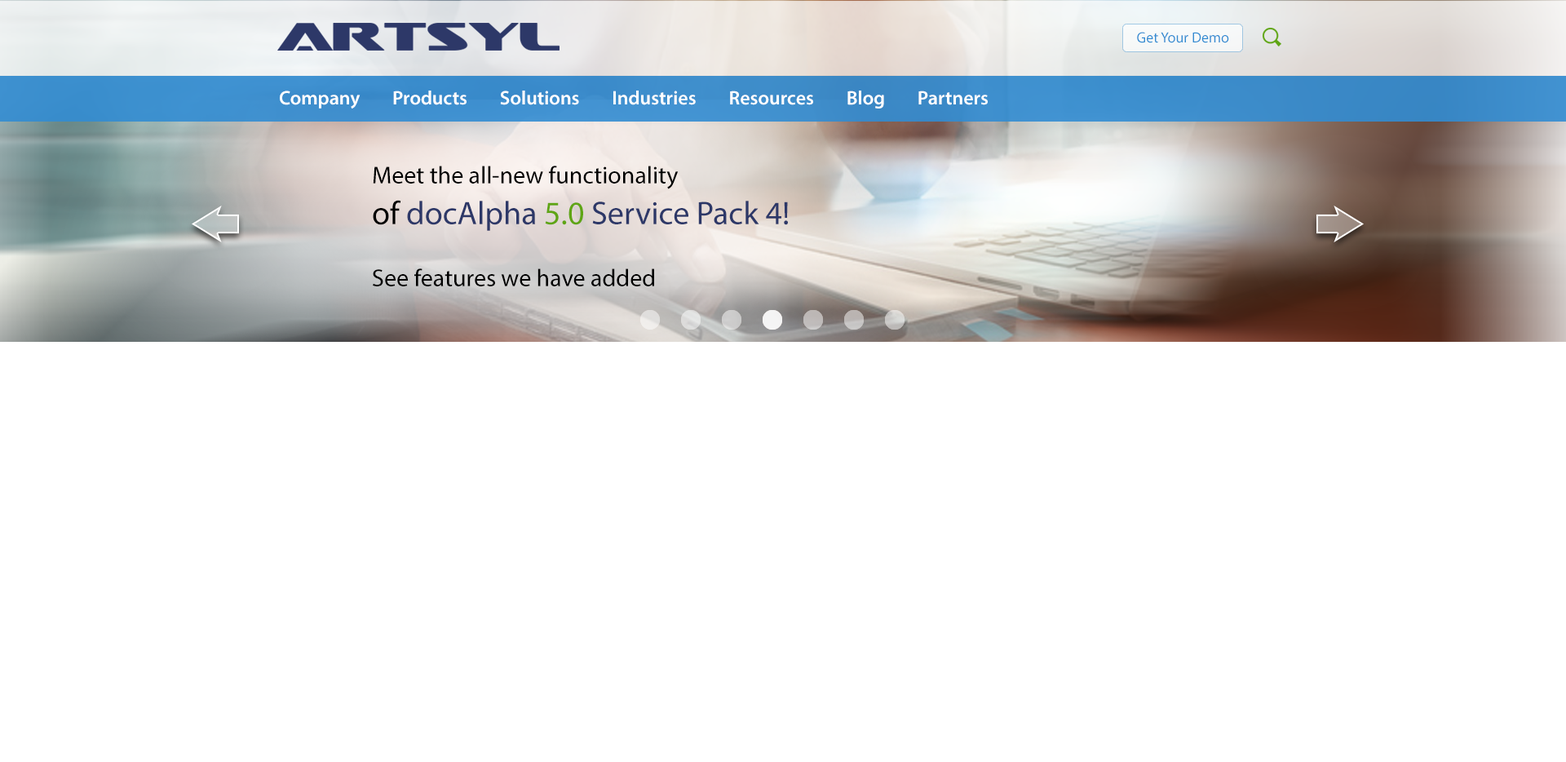
<style>
.page{position:relative;width:1566px;height:762px;background:#ffffff}
.page>*{position:absolute;margin:0}
.t1{font:14.7px "MyriadPro-Regular";color:#328cd2}
.t2{font:19.6px "MyriadPro-Semibold";color:#ffffff}
.t3{font:24.5px "MyriadPro-Regular";color:#000000}
.t4{font:32.6px "MyriadPro-Regular";color:#000000}
.t5{font:32.6px "MyriadPro-Regular";color:#2d3868}
.t6{font:32.6px "MyriadPro-Regular";color:#5fa514}
</style>
<div class="page">
<p class="t1" style="left:1137px;top:32px;width:92px;height:11px">Get Your Demo</p>
<p class="t2" style="left:280px;top:91px;width:707px;height:17px">Company        Products        Solutions        Industries        Resources        Blog        Partners</p>
<p class="t3" style="left:373px;top:166px;width:415px;height:120px">Meet the all-new functionality<br><span class="t4">of </span><span class="t5">docAlpha </span><span class="t6">5.0</span><span class="t5"> Service Pack 4!<br></span><br>See features we have added</p>
</div>
